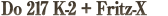
<style>
.page{position:relative;width:168px;height:16px;background:#ffffff}
.page>*{position:absolute;margin:0}
.t1{font:18px "RyuminPro-ExBold";letter-spacing:-0.06em;color:#4a3f32;font-weight:bold;scale:0.9 1}
</style>
<div class="page">
<p class="t1" style="left:1px;top:1px;width:146px;height:15px">Do 217 K-2 + Fritz-X</p>
</div>
